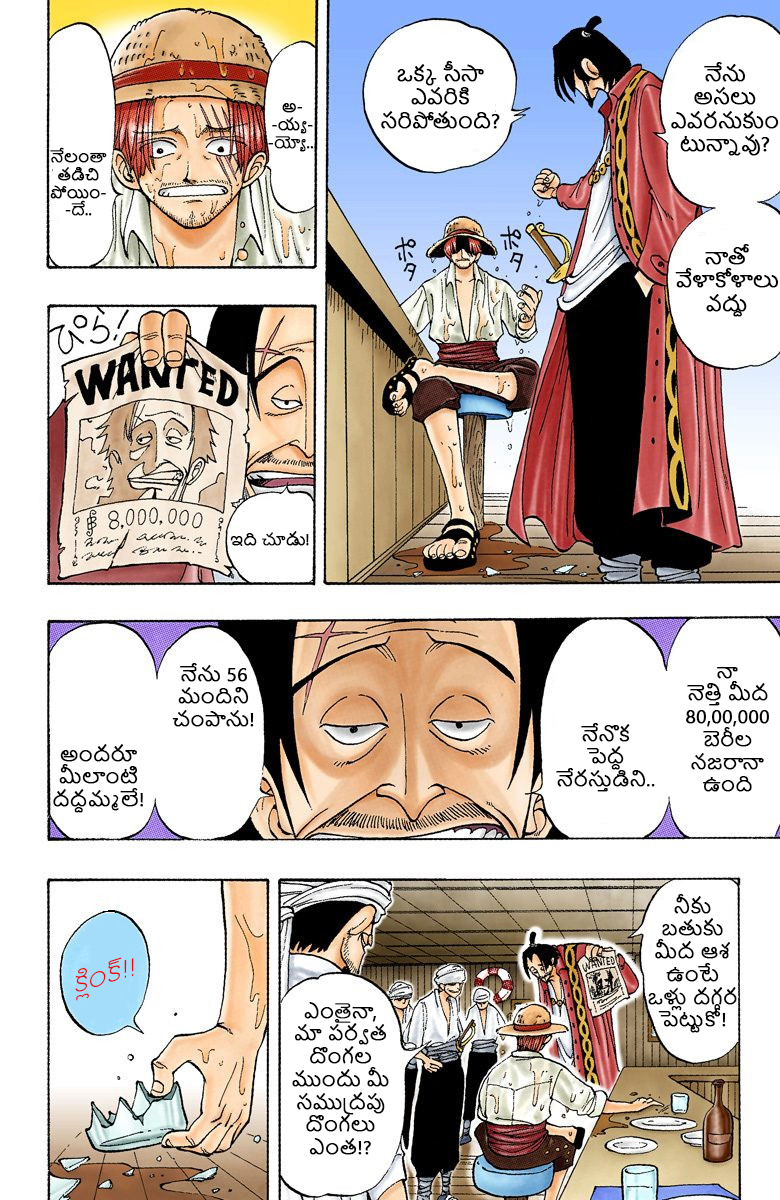
<style>
.page{position:relative;width:780px;height:1200px;background:#ffffff}
.page>*{position:absolute;margin:0}
.t1{font:19.6px "NirmalaUI";color:#000000;font-weight:bold}
.t2{font:14.9px "NirmalaUI";color:#000000;font-weight:bold}
.t3{font:15px "NirmalaUI";color:#000000;font-weight:bold}
.t4{font:19px "NirmalaUI";color:#000000;font-weight:bold}
.t5{font:25.5px "NirmalaUI-Semilight";color:#e70d0d}
</style>
<div class="page">
<p class="t1" style="left:381px;top:61px;width:119px;height:68px;text-align:center">ఒక్క సీసా ఎవరికి సరిపోతుంది?</p>
<p class="t1" style="left:671px;top:62px;width:108px;height:94px;text-align:center">నేను <br>అసలు ఎవరనుకుంటున్నావు?</p>
<p class="t2" style="left:268px;top:103px;width:49px;height:49px;text-align:center">అ-<br>-య్య-<br>-య్యో...</p>
<p class="t2" style="left:50px;top:147px;width:57px;height:69px;text-align:center">నేలంతా తడిచి పోయిం-<br>-దే..</p>
<p class="t1" style="left:675px;top:244px;width:104px;height:73px;text-align:center">నాతో వేళాకోళాలు వద్దు</p>
<p class="t3" style="left:230px;top:531px;width:79px;height:15px">ఇది చూడు!</p>
<p class="t4" style="left:172px;top:663px;width:82px;height:64px;text-align:center">నేను 56 మందిని చంపాను!</p>
<p class="t4" style="left:686px;top:667px;width:84px;height:125px;text-align:center">నా <br>నెత్తి మీద 80,00,000 బెరీల నజరానా ఉంది</p>
<p class="t4" style="left:556px;top:723px;width:99px;height:69px;text-align:center">నేనొక  <br>పెద్ద నేరస్తుడిని..</p>
<p class="t4" style="left:53px;top:744px;width:90px;height:69px;text-align:center">అందరూ మీలాంటి దద్దమ్మలే!</p>
<p class="t4" style="left:648px;top:894px;width:89px;height:139px;text-align:center">నీకు <br>బతుకు <br>మీద ఆశ ఉంటే <br>ఒళ్లు దగ్గర పెట్టుకో!</p>
<p class="t5" style="left:75px;top:957px;width:59px;height:44px;text-align:center">క్లింక్!!</p>
<p class="t4" style="left:292px;top:1002px;width:97px;height:153px;text-align:center">ఎంతైనా, <br>మా పర్వత దొంగల ముందు మీ సముద్రపు దొంగలు ఎంత!?</p>
</div>
